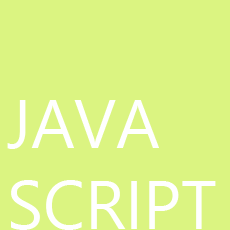
<style>
.page{position:relative;width:230px;height:230px;background:#dbf481}
.page>*{position:absolute;margin:0}
.t1{font:67.7px "Leelawadee";color:#ffffff}
</style>
<div class="page">
<p class="t1" style="left:7px;top:100px;width:209px;height:130px">JAVA<br>SCRIPT</p>
</div>
